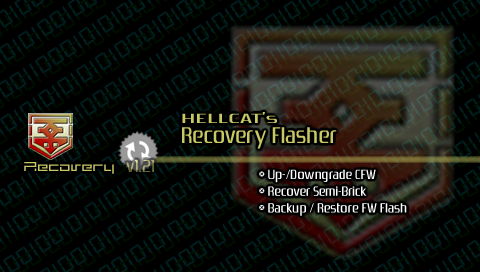
<style>
.page{position:relative;width:480px;height:272px;background:#000000}
.page>*{position:absolute;margin:0}
.t1{font:14px "Zrnic";color:#c8c864;scale:2 1}
.t2{font:24px "Zrnic";color:#c8c864}
.t3{font:18px "Zrnic"}
.t4{font:16px "MINIMALHARD";color:#c8c864;font-weight:bold}
.t5{font:14px "Zrnic";color:#ffffff}
</style>
<div class="page">
<p class="t1" style="left:182px;top:112px;width:95px;height:11px">HELLCAT’s</p>
<p class="t2" style="left:182px;top:127px;width:155px;height:22px">Recovery Flasher</p>
<p class="t3" style="left:126px;top:160px;width:28px;height:12px">v1.21</p>
<p class="t4" style="left:24px;top:162px;width:90px;height:12px">Recovery</p>
<p class="t5" style="left:259px;top:169px;width:148px;height:47px">* Up-/Downgrade CFW<br>* Recover Semi-Brick<br>* Backup / Restore FW Flash</p>
</div>
